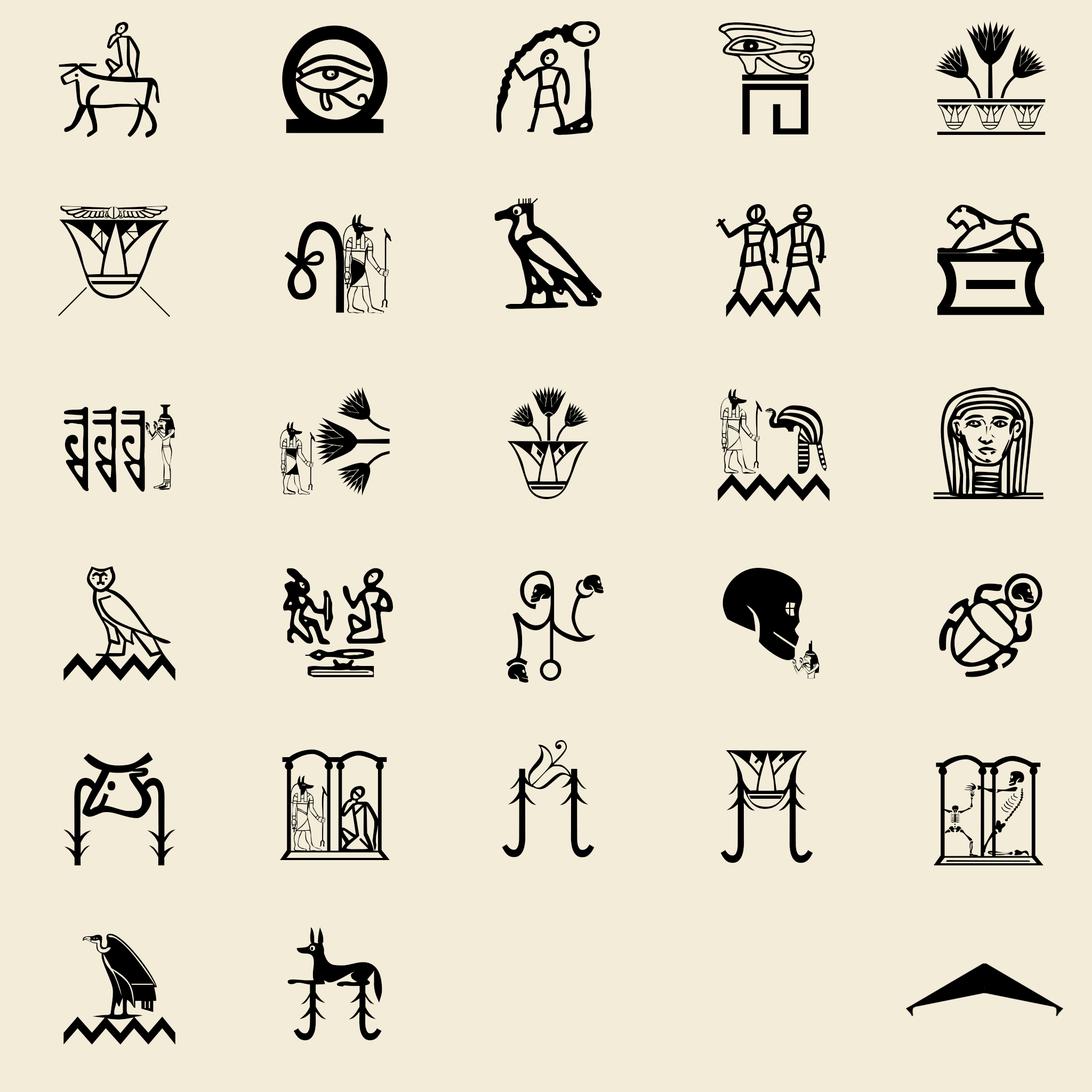
<style>
.page{position:relative;width:1092px;height:1092px;background:#f3ecd9}
.page>*{position:absolute;margin:0}
.t1{font:112px "HelloCleoPetra";color:#000000}
</style>
<div class="page">
<p class="t1" style="left:59px;top:22px;width:101px;height:116px">A</p>
<p class="t1" style="left:282px;top:26px;width:106px;height:107px">B</p>
<p class="t1" style="left:496px;top:21px;width:104px;height:114px">C</p>
<p class="t1" style="left:718px;top:22px;width:97px;height:112px">D</p>
<p class="t1" style="left:934px;top:21px;width:113px;height:114px">E</p>
<p class="t1" style="left:494px;top:198px;width:108px;height:111px">h</p>
<p class="t1" style="left:58px;top:206px;width:113px;height:111px">F</p>
<p class="t1" style="left:716px;top:204px;width:110px;height:113px">i</p>
<p class="t1" style="left:937px;top:204px;width:108px;height:111px">j</p>
<p class="t1" style="left:284px;top:214px;width:108px;height:100px">g</p>
<p class="t1" style="left:280px;top:387px;width:110px;height:109px">l</p>
<p class="t1" style="left:507px;top:386px;width:82px;height:113px">m</p>
<p class="t1" style="left:718px;top:389px;width:112px;height:112px">n</p>
<p class="t1" style="left:933px;top:387px;width:111px;height:112px">o</p>
<p class="t1" style="left:63px;top:404px;width:112px;height:89px">k</p>
<p class="t1" style="left:63px;top:566px;width:112px;height:115px">p</p>
<p class="t1" style="left:283px;top:568px;width:110px;height:109px">q</p>
<p class="t1" style="left:722px;top:568px;width:98px;height:111px">s</p>
<p class="t1" style="left:506px;top:571px;width:98px;height:112px">r</p>
<p class="t1" style="left:939px;top:573px;width:103px;height:104px">t</p>
<p class="t1" style="left:280px;top:749px;width:110px;height:111px">V</p>
<p class="t1" style="left:502px;top:740px;width:93px;height:117px">w</p>
<p class="t1" style="left:63px;top:752px;width:113px;height:113px">u</p>
<p class="t1" style="left:720px;top:750px;width:93px;height:113px">x</p>
<p class="t1" style="left:934px;top:755px;width:109px;height:110px">Y</p>
<p class="t1" style="left:287px;top:927px;width:95px;height:113px">*</p>
<p class="t1" style="left:63px;top:934px;width:112px;height:111px">z</p>
</div>
